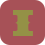
<style>
.page{position:relative;width:45px;height:45px;background:#a75157}
.page>*{position:absolute;margin:0}
.t1{font:50px "Saddlebag-Black";color:#949146}
</style>
<div class="page">
<p class="t1" style="left:13px;top:10px;width:20px;height:26px">I</p>
</div>
